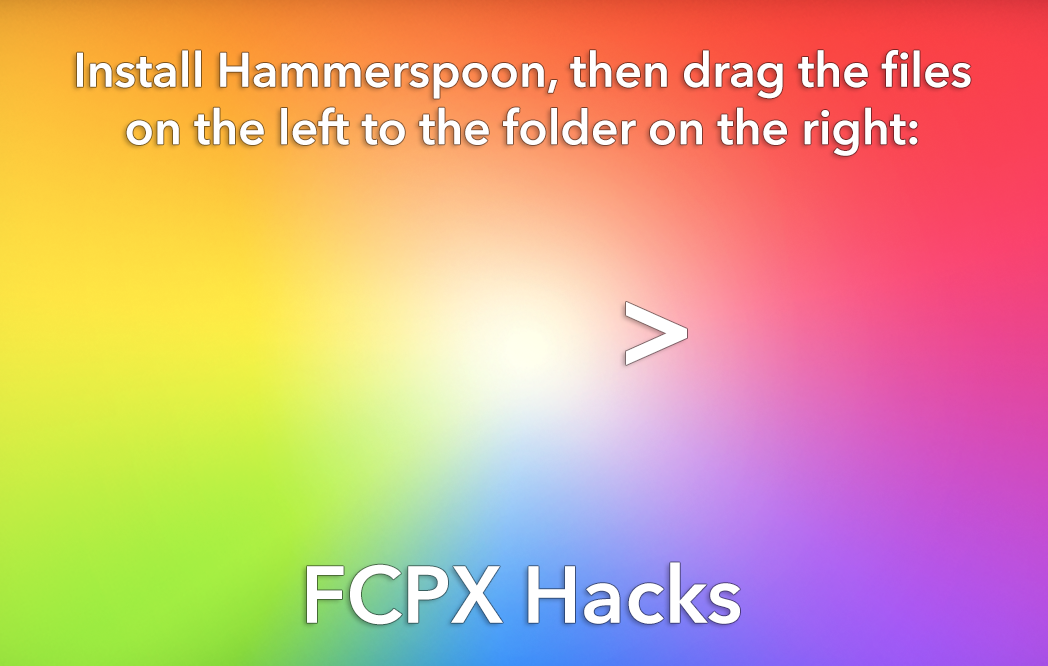
<style>
.page{position:relative;width:1048px;height:666px}
.page>*{position:absolute;margin:0}
.t1{font:48px "AvenirNext-DemiBold";color:#ffffff}
.t2{font:120px "AvenirNext-DemiBold";color:#ffffff}
.t3{font:79.8px "AvenirNext-DemiBold";color:#ffffff}
</style>
<div class="page">
<p class="t1" style="left:77px;top:50px;width:894px;height:106px;text-align:center">Install Hammerspoon, then drag the files<br>on the left to the folder on the right:</p>
<p class="t2" style="left:626px;top:302px;width:61px;height:63px">&gt;</p>
<p class="t3" style="left:307px;top:562px;width:433px;height:63px">FCPX Hacks</p>
</div>
